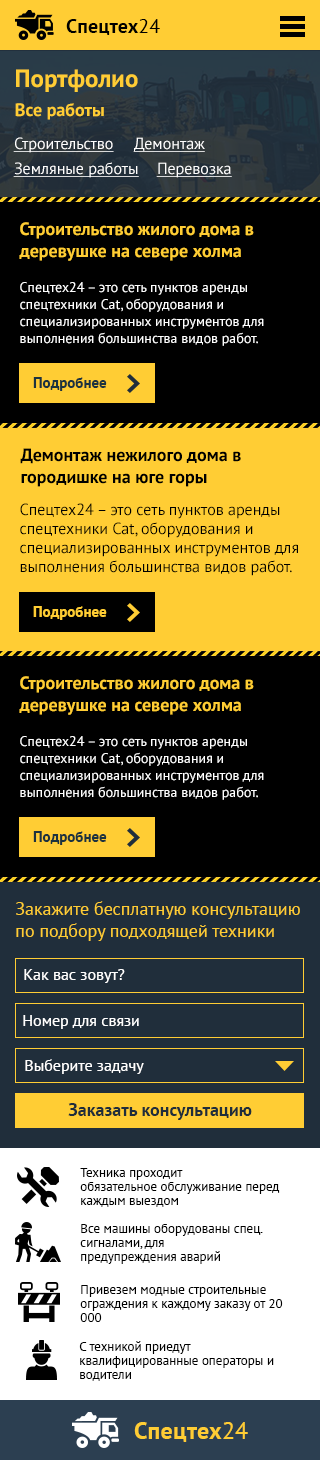
<style>
.page{position:relative;width:320px;height:1460px;background:#000000}
.page>*{position:absolute;margin:0}
.t1{font:20px "PTSans-Bold";letter-spacing:0.01em;color:#000000}
.t2{font:20px "PTSans-Regular";letter-spacing:0.01em;color:#000000}
.t3{font:25px "PTSans-Bold";color:#ffcd34}
.t4{font:18px "PTSans-Bold";color:#ffcd34}
.t5{font:16px "PTSans-Regular";color:#ffffff;text-decoration:underline}
.t6{font:14px "PTSans-Regular";color:#ffffff}
.t7{font:15px "PTSans-Bold";color:#1d333f}
.t8{font:18px "PTSans-Bold";color:#000000}
.t9{font:16px "PTSans-Regular";color:#000000}
.t10{font:15px "PTSans-Bold";color:#ffcd34}
.t11{font:18px "PTSans-Regular";color:#ffcd34}
.t12{font:16px "PTSans-Regular";color:#ffffff}
.t13{font:18px "PTSans-Bold";color:#202e3b}
.t14{font:13px/14px "PTSans-Regular";color:#000000}
.t15{font:24px "PTSans-Bold";letter-spacing:0.01em;color:#ffcd34}
.t16{font:24px "PTSans-Regular";letter-spacing:0.01em;color:#ffcd34}
</style>
<div class="page">
<p class="t1" style="left:66px;top:19px;width:94px;height:16px">Спецтех<span class="t2">24</span></p>
<p class="t3" style="left:16px;top:69px;width:122px;height:23px">Портфолио</p>
<p class="t4" style="left:15px;top:103px;width:89px;height:17px">Все работы</p>
<p class="t5" style="left:13px;top:137px;width:101px;height:16px">Строительство</p>
<p class="t5" style="left:133px;top:137px;width:72px;height:15px">Демонтаж</p>
<p class="t5" style="left:13px;top:162px;width:126px;height:16px">Земляные работы</p>
<p class="t5" style="left:156px;top:162px;width:76px;height:16px">Перевозка</p>
<p class="t4" style="left:19px;top:222px;width:235px;height:39px">Строительство жилого дома в деревушке на севере холма</p>
<p class="t6" style="left:20px;top:282px;width:244px;height:64px">Спецтех24 – это сеть пунктов аренды<br>спецтехники Cat, оборудования и<br>специализированных инструментов для <br>выполнения большинства видов работ.</p>
<p class="t7" style="left:33px;top:377px;width:74px;height:14px">Подробнее</p>
<p class="t8" style="left:20px;top:448px;width:221px;height:39px">Демонтаж нежилого дома в городишке на юге горы</p>
<p class="t9" style="left:20px;top:503px;width:278px;height:73px">Спецтех24 – это сеть пунктов аренды<br>спецтехники Cat, оборудования и<br>специализированных инструментов для <br>выполнения большинства видов работ.</p>
<p class="t10" style="left:33px;top:606px;width:74px;height:14px">Подробнее</p>
<p class="t4" style="left:19px;top:676px;width:235px;height:39px">Строительство жилого дома в деревушке на севере холма</p>
<p class="t6" style="left:20px;top:736px;width:244px;height:64px">Спецтех24 – это сеть пунктов аренды<br>спецтехники Cat, оборудования и<br>специализированных инструментов для <br>выполнения большинства видов работ.</p>
<p class="t7" style="left:33px;top:831px;width:74px;height:14px">Подробнее</p>
<p class="t11" style="left:16px;top:901px;width:284px;height:40px">Закажите бесплатную консультацию <br>по подбору подходящей техники</p>
<p class="t12" style="left:24px;top:969px;width:101px;height:14px">Как вас зовут?</p>
<p class="t12" style="left:23px;top:1015px;width:116px;height:14px">Номер для связи</p>
<p class="t12" style="left:25px;top:1059px;width:119px;height:15px">Выберите задачу</p>
<p class="t13" style="left:68px;top:1103px;width:184px;height:17px">Заказать консультацию</p>
<p class="t14" style="left:80px;top:1168px;width:200px;height:39px">Техника проходит<br>обязательное обслуживание перед каждым выездом</p>
<p class="t14" style="left:80px;top:1224px;width:183px;height:40px">Все машины оборудованы спец. сигналами, для <br>предупреждения аварий</p>
<p class="t14" style="left:80px;top:1285px;width:203px;height:37px">Привезем модные строительные ограждения к каждому заказу от 20 000</p>
<p class="t14" style="left:79px;top:1341px;width:195px;height:40px">С техникой приедут<br>квалифицированные операторы и водители</p>
<p class="t15" style="left:134px;top:1422px;width:114px;height:20px">Спецтех<span class="t16">24</span></p>
</div>
